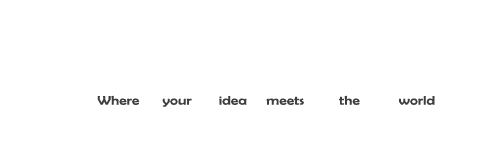
<style>
.page{position:relative;width:503px;height:150px;background:#ffffff}
.page>*{position:absolute;margin:0}
.t1{font:12.5px "BerlinSansFB-Reg";color:#3e3e3e;scale:1.24 1}
</style>
<div class="page">
<p class="t1" style="left:97px;top:95px;width:338px;height:12px">Where      your       idea     meets         the          world</p>
</div>
